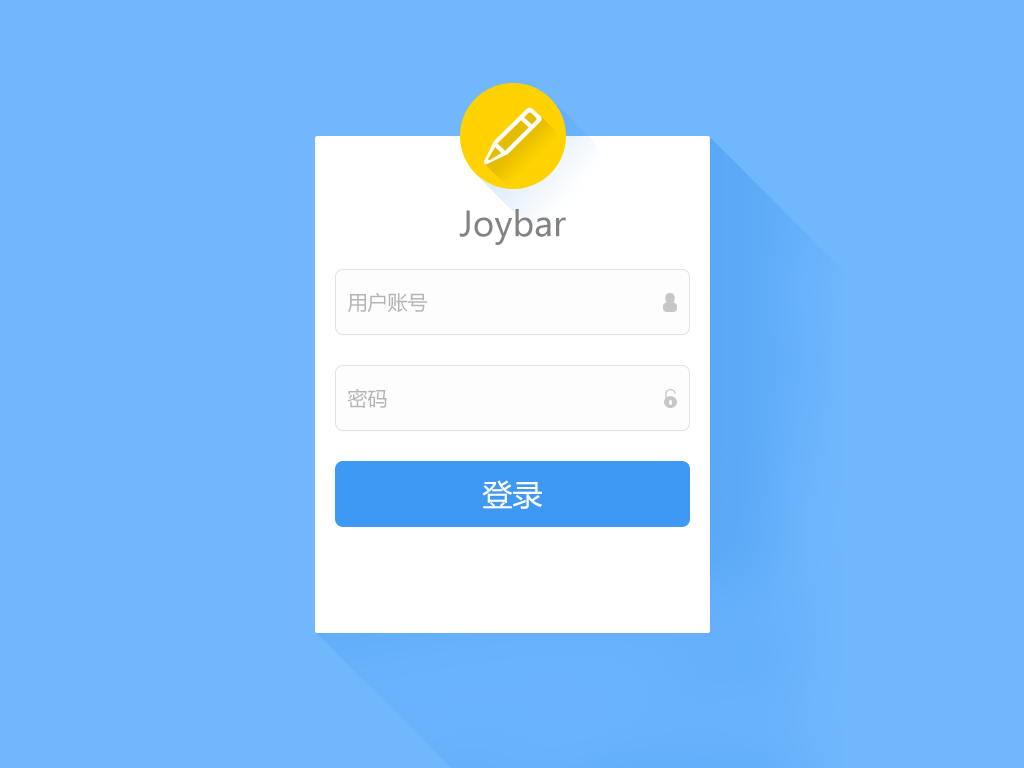
<style>
.page{position:relative;width:1024px;height:768px;background:#70b7fe}
.page>*{position:absolute;margin:0}
.t1{font:34px "MicrosoftYaHei";color:#828282}
.t2{font:20px "MicrosoftYaHei";color:#b4b4b4}
.t3{font:30px "MicrosoftYaHei";color:#ffffff}
</style>
<div class="page">
<p class="t1" style="left:459px;top:209px;width:107px;height:36px">Joybar</p>
<p class="t2" style="left:348px;top:292px;width:80px;height:21px">用户账号</p>
<p class="t2" style="left:347px;top:388px;width:40px;height:20px">密码</p>
<p class="t3" style="left:482px;top:480px;width:60px;height:29px">登录</p>
</div>
